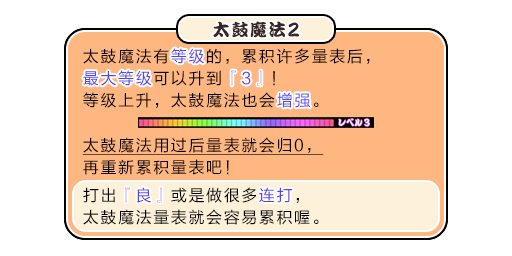
<style>
.page{position:relative;width:512px;height:256px;background:#ffffff}
.page>*{position:absolute;margin:0}
.t1{font:17px "DFPKanTingLiuW9";letter-spacing:0.1em;color:#3b2626}
.t2{font:20.4px "DFPKanTingLiuW9";letter-spacing:0.1em;color:#3b2626;scale:0.83 1}
.t3{font:16px/22px "FZLTHJW--GB1-0";letter-spacing:0.1em;color:#000000}
.t4{font:16px/22px "FZLTHJW--GB1-0";letter-spacing:0.1em;color:#5444ed}
.t5{font:16px "FZLTHJW--GB1-0";letter-spacing:0.1em;color:#5444ed}
.t6{font:16px/22px "FZLTHJW--GB1-0";letter-spacing:0.1em;color:#000000;text-decoration:underline}
</style>
<div class="page">
<p class="t1" style="left:213px;top:21px;width:86px;height:17px">太鼓魔法<span class="t2">2</span></p>
<p class="t3" style="left:83px;top:48px;width:287px;height:60px">太鼓魔法有<span class="t4">等级</span>的，累积许多量表后，<br><span class="t4">最大等级</span>可以升到<span class="t4">『3』</span>！<br>等级上升，太鼓魔法也会<span class="t4">增强</span>。</p>
<p class="t5" style="left:171px;top:48px;width:33px;height:16px">等级</p>
<p class="t5" style="left:83px;top:70px;width:69px;height:16px">最大等级</p>
<p class="t5" style="left:231px;top:70px;width:31px;height:16px">『3』</p>
<p class="t5" style="left:277px;top:92px;width:34px;height:16px">增强</p>
<p class="t6" style="left:82px;top:137px;width:242px;height:38px">太鼓魔法用过后量表就会归0，<br><span class="t3">再重新累积量表吧！</span></p>
<p class="t3" style="left:83px;top:187px;width:236px;height:38px">打出<span class="t4">『良』</span>或是做很多<span class="t4">连打</span>，<br>太鼓魔法量表就会容易累积喔。</p>
<p class="t5" style="left:125px;top:187px;width:37px;height:16px">『良』</p>
<p class="t5" style="left:259px;top:187px;width:34px;height:16px">连打</p>
</div>
